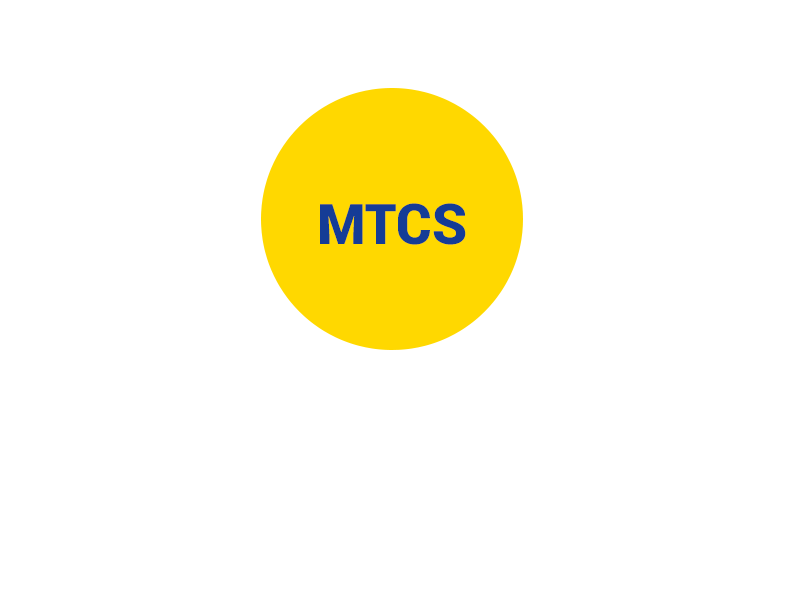
<style>
.page{position:relative;width:800px;height:600px;background:#ffffff}
.page>*{position:absolute;margin:0}
.t1{font:56.1px "Roboto-Black";color:#153c96}
</style>
<div class="page">
<p class="t1" style="left:320px;top:203px;width:146px;height:42px">MTCS</p>
</div>
